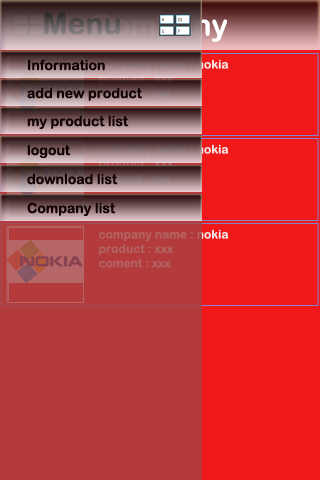
<style>
.page{position:relative;width:320px;height:480px;background:#f01818}
.page>*{position:absolute;margin:0}
.t1{font:14px "ArialRoundedMTBold";color:#130202}
.t2{font:12px "ArialRoundedMTBold";color:#b36161}
</style>
<div class="page">
<p class="t1" style="left:28px;top:59px;width:77px;height:12px">Information</p>
<p class="t1" style="left:27px;top:87px;width:116px;height:14px">add new product</p>
<p class="t1" style="left:27px;top:115px;width:102px;height:14px">my product list</p>
<p class="t1" style="left:27px;top:144px;width:44px;height:14px">logout</p>
<p class="t1" style="left:27px;top:173px;width:91px;height:12px">download list</p>
<p class="t1" style="left:27px;top:202px;width:89px;height:14px">Company list</p>
<p class="t2" style="left:99px;top:229px;width:130px;height:39px">company name : nokia<br>product : xxx<br>coment : xxx</p>
</div>
